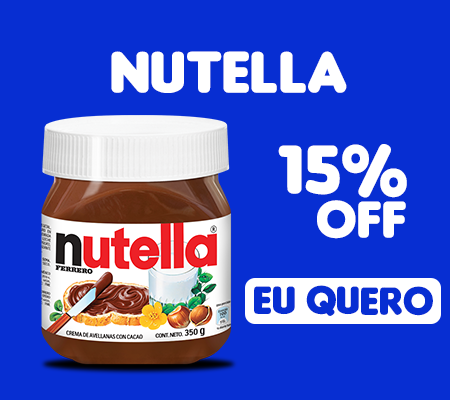
<style>
.page{position:relative;width:450px;height:400px;background:#072ed2}
.page>*{position:absolute;margin:0}
.t1{font:62.5px "Insaniburger";color:#ffffff}
.t2{font:73.2px "Insaniburger";color:#ffffff}
.t3{font:55.3px "Insaniburger";color:#ffffff}
.t4{font:41.6px "Insaniburger";color:#072ed2}
</style>
<div class="page">
<p class="t1" style="left:111px;top:51px;width:236px;height:42px">nutella</p>
<p class="t2" style="left:278px;top:144px;width:129px;height:54px">15%</p>
<p class="t3" style="left:317px;top:200px;width:89px;height:39px">off</p>
<p class="t4" style="left:254px;top:285px;width:179px;height:31px">eu quero</p>
</div>
